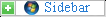
<style>
.page{position:relative;width:106px;height:17px;background:#ffffff}
.page>*{position:absolute;margin:0}
.t1{font:14px "TimesNewRomanPSMT";letter-spacing:0.05em;color:#267cd3}
</style>
<div class="page">
<p class="t1" style="left:45px;top:2px;width:45px;height:10px">Sidebar</p>
</div>
